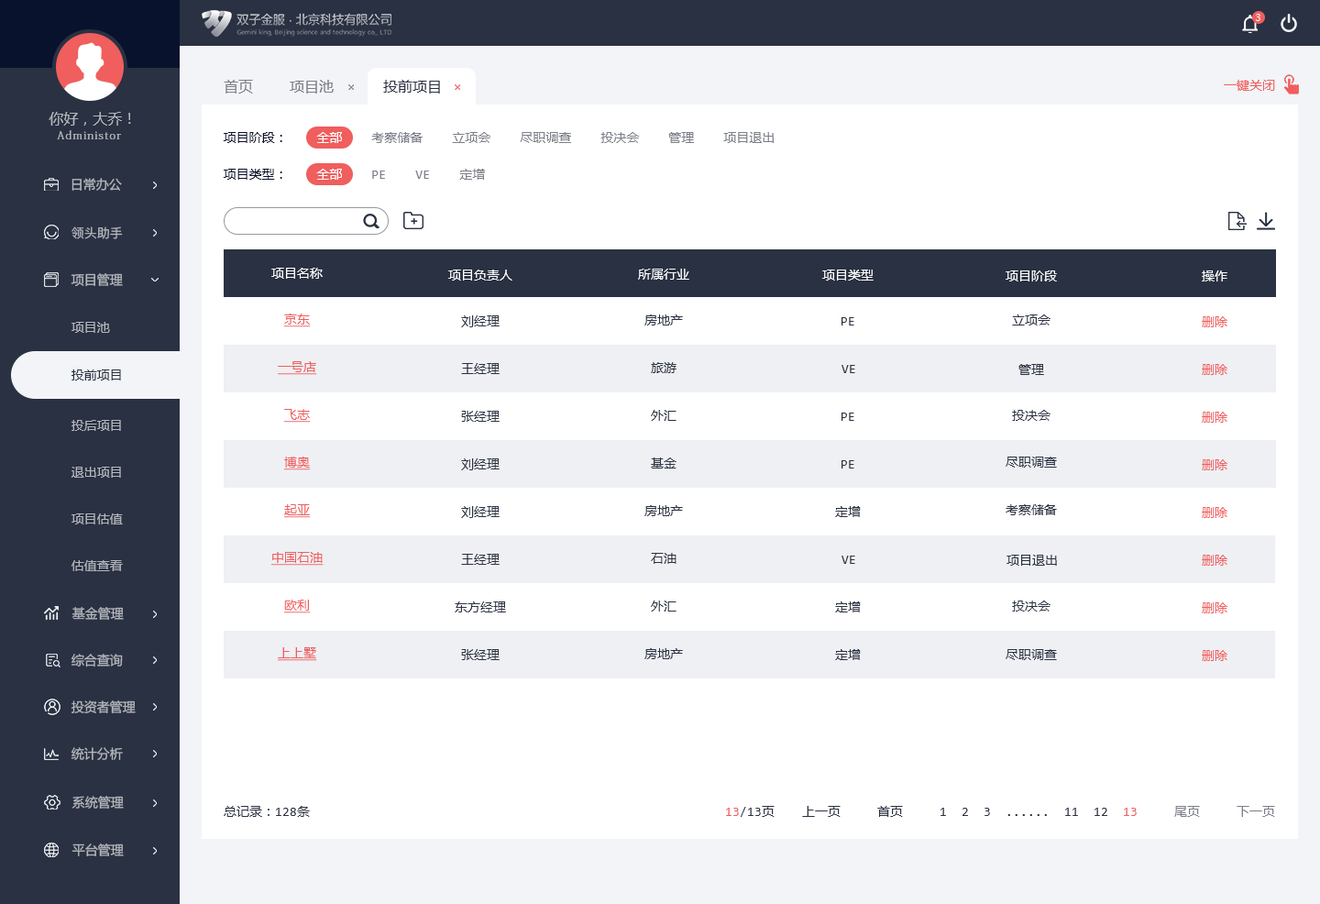
<style>
.page{position:relative;width:1320px;height:904px;background:#ffffff}
.page>*{position:absolute;margin:0}
.t1{font:9.2px "MicrosoftYaHeiUI";color:#ffffff}
.t2{font:14.7px "MicrosoftYaHeiMono";color:#7b7f88}
.t3{font:14.7px "MicrosoftYaHeiMono";color:#2a3142}
.t4{font:12.8px "MicrosoftYaHeiMono";color:#f05e5e}
.t5{font:14.7px "MicrosoftYaHeiMono";color:#b4b7bd}
.t6{font:11px "AdobeFangsongStd-Regular";letter-spacing:0.1em;color:#b4b7bd}
.t7{font:12.8px "MicrosoftYaHeiMono";color:#7b7f88}
.t8{font:12.8px "MicrosoftYaHeiMono";color:#08122c}
.t9{font:12.8px "MicrosoftYaHeiMono";color:#ffffff}
.t10{font:12.8px "MicrosoftYaHeiUI";color:#b4b7bd}
.t11{font:12.8px "PingFang-SC-Medium";color:#b4b7bd}
.t12{font:12.8px "MicrosoftYaHeiMono";color:#f05e5e;text-decoration:underline}
.t13{font:12.8px "MicrosoftYaHeiMono";color:#2a3142}
.t14{font:12.8px "MicrosoftYaHeiUI";color:#2a3142}
</style>
<div class="page">
<p class="t1" style="left:1256px;top:14px;width:4px;height:7px">3</p>
<p class="t2" style="left:224px;top:80px;width:29px;height:13px">首页</p>
<p class="t2" style="left:290px;top:80px;width:44px;height:13px">项目池</p>
<p class="t3" style="left:383px;top:80px;width:57px;height:13px">投前项目</p>
<p class="t4" style="left:1223px;top:80px;width:52px;height:11px">一键关闭</p>
<p class="t5" style="left:49px;top:112px;width:82px;height:14px">你好，大乔！</p>
<p class="t6" style="left:57px;top:130px;width:64px;height:9px">Administor</p>
<p class="t7" style="left:223px;top:132px;width:550px;height:11px"><span class="t8">项目阶段：    </span><span class="t9">全部    </span>考察储备    立项会    尽职调查    投决会    管理    项目退出</p>
<p class="t7" style="left:223px;top:169px;width:262px;height:11px"><span class="t8">项目类型：    </span><span class="t9">全部    </span>PE    VE    定增</p>
<p class="t10" style="left:71px;top:178px;width:51px;height:13px">日常办公</p>
<p class="t11" style="left:71px;top:226px;width:52px;height:13px">领头助手</p>
<p class="t9" style="left:271px;top:268px;width:52px;height:11px">项目名称</p>
<p class="t9" style="left:448px;top:269px;width:64px;height:11px">项目负责人</p>
<p class="t9" style="left:638px;top:269px;width:51px;height:11px">所属行业</p>
<p class="t9" style="left:822px;top:269px;width:51px;height:11px">项目类型</p>
<p class="t10" style="left:71px;top:273px;width:52px;height:14px">项目管理</p>
<p class="t9" style="left:1005px;top:270px;width:52px;height:11px">项目阶段</p>
<p class="t9" style="left:1201px;top:270px;width:26px;height:11px">操作</p>
<p class="t12" style="left:284px;top:313px;width:27px;height:14px">京东</p>
<p class="t13" style="left:461px;top:315px;width:38px;height:12px">刘经理</p>
<p class="t13" style="left:644px;top:314px;width:39px;height:11px">房地产</p>
<p class="t13" style="left:841px;top:317px;width:13px;height:8px">PE</p>
<p class="t13" style="left:1012px;top:314px;width:38px;height:11px">立项会</p>
<p class="t4" style="left:1201px;top:316px;width:26px;height:11px">删除</p>
<p class="t10" style="left:71px;top:322px;width:39px;height:11px">项目池</p>
<p class="t12" style="left:278px;top:361px;width:39px;height:14px">一号店</p>
<p class="t13" style="left:461px;top:363px;width:38px;height:11px">王经理</p>
<p class="t13" style="left:651px;top:362px;width:25px;height:11px">旅游</p>
<p class="t13" style="left:841px;top:365px;width:14px;height:8px">VE</p>
<p class="t13" style="left:1018px;top:364px;width:26px;height:11px">管理</p>
<p class="t4" style="left:1201px;top:364px;width:26px;height:11px">删除</p>
<p class="t14" style="left:71px;top:369px;width:50px;height:11px">投前项目</p>
<p class="t12" style="left:284px;top:409px;width:27px;height:13px">飞志</p>
<p class="t13" style="left:461px;top:411px;width:38px;height:11px">张经理</p>
<p class="t13" style="left:651px;top:410px;width:25px;height:11px">外汇</p>
<p class="t13" style="left:841px;top:412px;width:13px;height:9px">PE</p>
<p class="t13" style="left:1012px;top:410px;width:38px;height:11px">投决会</p>
<p class="t4" style="left:1201px;top:411px;width:26px;height:11px">删除</p>
<p class="t10" style="left:71px;top:420px;width:50px;height:11px">投后项目</p>
<p class="t12" style="left:284px;top:456px;width:27px;height:14px">博奥</p>
<p class="t13" style="left:461px;top:458px;width:38px;height:12px">刘经理</p>
<p class="t13" style="left:651px;top:457px;width:25px;height:11px">基金</p>
<p class="t13" style="left:841px;top:460px;width:13px;height:8px">PE</p>
<p class="t13" style="left:1005px;top:456px;width:52px;height:11px">尽职调查</p>
<p class="t4" style="left:1201px;top:459px;width:26px;height:11px">删除</p>
<p class="t10" style="left:71px;top:466px;width:50px;height:11px">退出项目</p>
<p class="t12" style="left:284px;top:504px;width:27px;height:14px">起亚</p>
<p class="t13" style="left:461px;top:506px;width:38px;height:12px">刘经理</p>
<p class="t13" style="left:644px;top:505px;width:39px;height:11px">房地产</p>
<p class="t13" style="left:835px;top:506px;width:26px;height:11px">定增</p>
<p class="t13" style="left:1005px;top:504px;width:52px;height:11px">考察储备</p>
<p class="t4" style="left:1201px;top:507px;width:26px;height:11px">删除</p>
<p class="t10" style="left:71px;top:513px;width:52px;height:11px">项目估值</p>
<p class="t12" style="left:271px;top:552px;width:52px;height:13px">中国石油</p>
<p class="t13" style="left:461px;top:554px;width:38px;height:11px">王经理</p>
<p class="t13" style="left:651px;top:553px;width:25px;height:11px">石油</p>
<p class="t13" style="left:841px;top:555px;width:14px;height:9px">VE</p>
<p class="t13" style="left:1006px;top:554px;width:51px;height:11px">项目退出</p>
<p class="t4" style="left:1201px;top:554px;width:26px;height:11px">删除</p>
<p class="t10" style="left:71px;top:560px;width:52px;height:11px">估值查看</p>
<p class="t12" style="left:284px;top:599px;width:27px;height:14px">欧利</p>
<p class="t13" style="left:455px;top:601px;width:51px;height:11px">东方经理</p>
<p class="t13" style="left:651px;top:600px;width:25px;height:11px">外汇</p>
<p class="t13" style="left:835px;top:601px;width:26px;height:11px">定增</p>
<p class="t13" style="left:1012px;top:600px;width:38px;height:11px">投决会</p>
<p class="t4" style="left:1201px;top:602px;width:26px;height:11px">删除</p>
<p class="t10" style="left:71px;top:607px;width:53px;height:13px">基金管理</p>
<p class="t10" style="left:71px;top:653px;width:52px;height:14px">综合查询</p>
<p class="t12" style="left:278px;top:647px;width:39px;height:14px">上上墅</p>
<p class="t13" style="left:461px;top:649px;width:38px;height:11px">张经理</p>
<p class="t13" style="left:644px;top:648px;width:39px;height:11px">房地产</p>
<p class="t13" style="left:835px;top:649px;width:26px;height:11px">定增</p>
<p class="t13" style="left:1005px;top:649px;width:52px;height:11px">尽职调查</p>
<p class="t4" style="left:1201px;top:650px;width:26px;height:11px">删除</p>
<p class="t10" style="left:71px;top:700px;width:65px;height:13px">投资者管理</p>
<p class="t10" style="left:71px;top:747px;width:52px;height:13px">统计分析</p>
<p class="t10" style="left:71px;top:795px;width:53px;height:13px">系统管理</p>
<p class="t13" style="left:224px;top:806px;width:86px;height:11px">总记录：128条</p>
<p class="t13" style="left:726px;top:806px;width:48px;height:11px"><span class="t4">13</span>/13页</p>
<p class="t13" style="left:802px;top:806px;width:473px;height:11px">上一页     首页     1  2  3  ......  11  12  <span class="t4">13     </span><span class="t7">尾页     下一页</span></p>
<p class="t10" style="left:71px;top:843px;width:53px;height:13px">平台管理</p>
</div>
